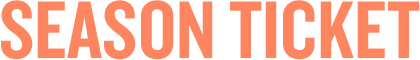
<style>
.page{position:relative;width:420px;height:60px;background:#ffffff}
.page>*{position:absolute;margin:0}
.t1{font:85px "Knockout-HTF49-Liteweight";color:#fd8661}
</style>
<div class="page">
<p class="t1" style="left:1px;top:0px;width:419px;height:60px">SEASON TICKET</p>
</div>
